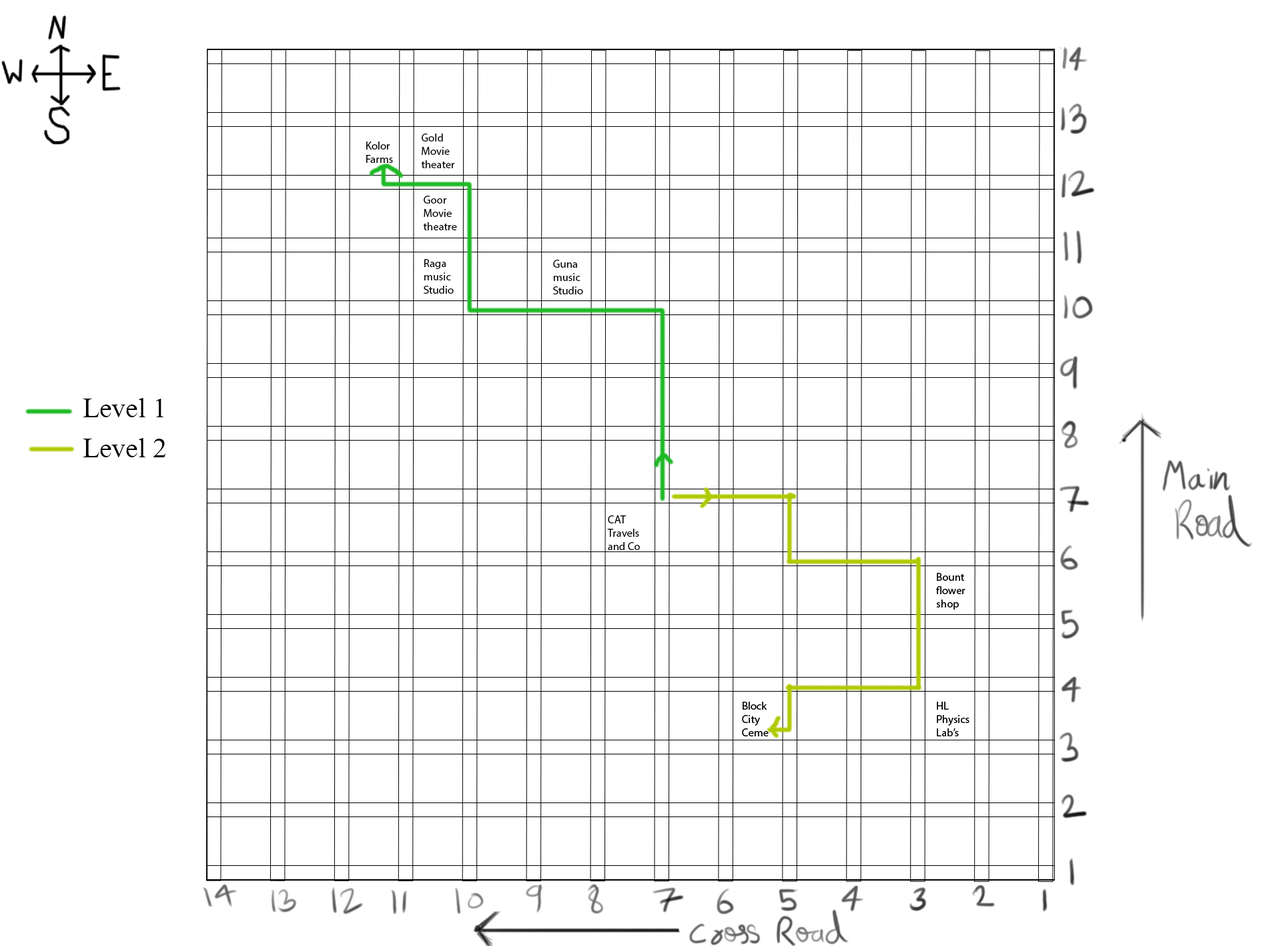
<style>
.page{position:relative;width:1261px;height:946px;background:#ffffff}
.page>*{position:absolute;margin:0}
.t1{font:11.1px "MyriadPro-Regular";color:#000000}
.t2{font:27.8px "MongolianBaiti";color:#000000}
</style>
<div class="page">
<p class="t1" style="left:421px;top:133px;width:34px;height:35px">Gold Movie theater</p>
<p class="t1" style="left:366px;top:141px;width:27px;height:22px">Kolor Farms</p>
<p class="t1" style="left:423px;top:196px;width:34px;height:34px">Goor Movie theatre</p>
<p class="t1" style="left:424px;top:259px;width:30px;height:35px">Raga music Studio</p>
<p class="t1" style="left:553px;top:260px;width:30px;height:34px">Guna music Studio</p>
<p class="t2" style="left:83px;top:398px;width:80px;height:19px">Level 1</p>
<p class="t2" style="left:83px;top:438px;width:83px;height:19px">Level 2</p>
<p class="t1" style="left:607px;top:515px;width:33px;height:35px">CAT Travels and Co</p>
</div>
